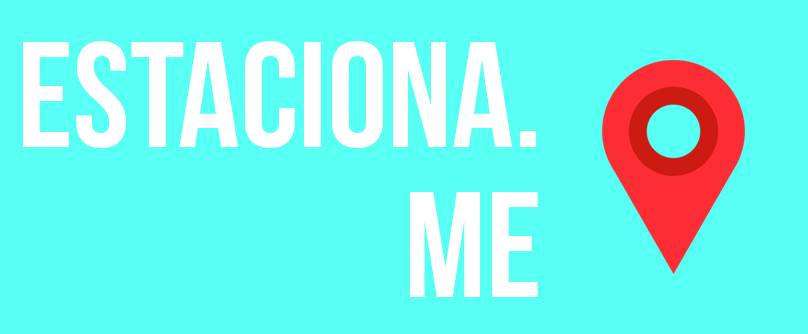
<style>
.page{position:relative;width:808px;height:334px;background:#58fff3}
.page>*{position:absolute;margin:0}
.t1{font:150.3px/150px "BebasNeue";color:#ffffff}
</style>
<div class="page">
<p class="t1" style="left:23px;top:41px;width:515px;height:256px;text-align:right">Estaciona.<br>me</p>
</div>
